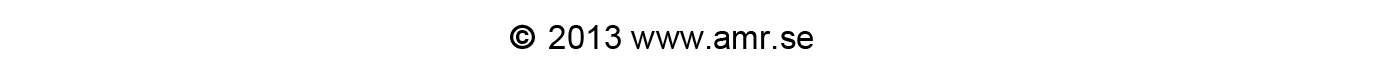
<style>
.page{position:relative;width:1400px;height:70px;background:#ffffff}
.page>*{position:absolute;margin:0}
.t1{font:33.3px "ArialMT";color:#000000}
.t2{font:33.3px "BrushScriptStd";color:#000000}
</style>
<div class="page">
<p class="t1" style="left:510px;top:24px;width:303px;height:25px"><span class="t2"> © </span>2013 www.amr.se</p>
</div>
